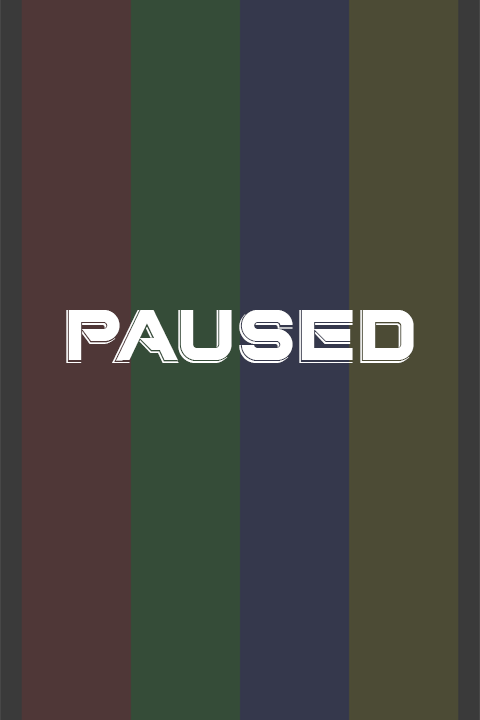
<style>
.page{position:relative;width:480px;height:720px;background:#4c4b35}
.page>*{position:absolute;margin:0}
.t1{font:72px "SummitBold-Display";color:#ffffff}
</style>
<div class="page">
<p class="t1" style="left:66px;top:310px;width:348px;height:53px">PAUSED</p>
</div>
